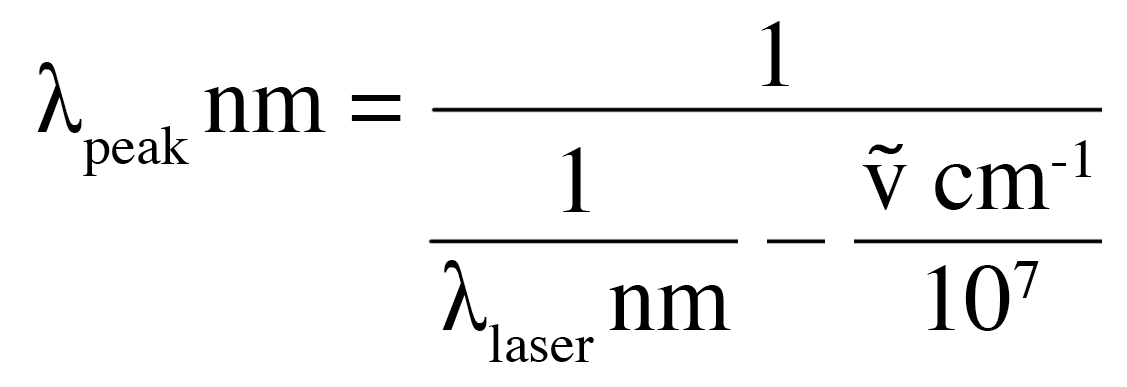
<style>
.page{position:relative;width:1127px;height:387px;background:#ffffff}
.page>*{position:absolute;margin:0}
.t1{font:96px "Times-Roman";color:#000000}
</style>
<div class="page">
<p class="t1" style="left:761px;top:21px;width:28px;height:65px">1</p>
<p class="t1" style="left:37px;top:62px;width:364px;height:114px">λpeak nm =</p>
<p class="t1" style="left:562px;top:147px;width:28px;height:65px">1</p>
<p class="t1" style="left:862px;top:140px;width:229px;height:70px">ṽ cm-1</p>
<p class="t1" style="left:442px;top:260px;width:289px;height:102px">λlaser nm</p>
<p class="t1" style="left:927px;top:261px;width:112px;height:70px">107</p>
</div>
